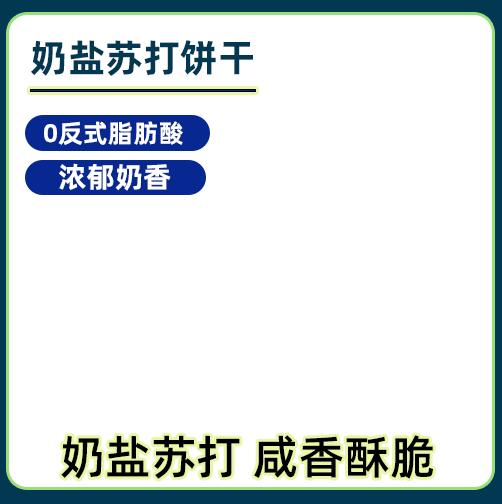
<style>
.page{position:relative;width:502px;height:504px;background:#ffffff}
.page>*{position:absolute;margin:0}
.t1{font:38.3px "AlibabaPuHuiTi-Bold";color:#033853}
.t2{font:25.5px "AlibabaPuHuiTi-Bold";color:#ffffff}
.t3{font:28.9px "AlibabaPuHuiTi-Bold";color:#ffffff}
.t4{font:46.2px "AlibabaPuHuiTi-Medium";color:#000000}
</style>
<div class="page">
<p class="t1" style="left:31px;top:40px;width:222px;height:36px">奶盐苏打饼干</p>
<p class="t2" style="left:44px;top:121px;width:139px;height:24px">0反式脂肪酸</p>
<p class="t3" style="left:59px;top:163px;width:112px;height:28px">浓郁奶香</p>
<p class="t4" style="left:61px;top:435px;width:372px;height:44px">奶盐苏打 咸香酥脆</p>
</div>
